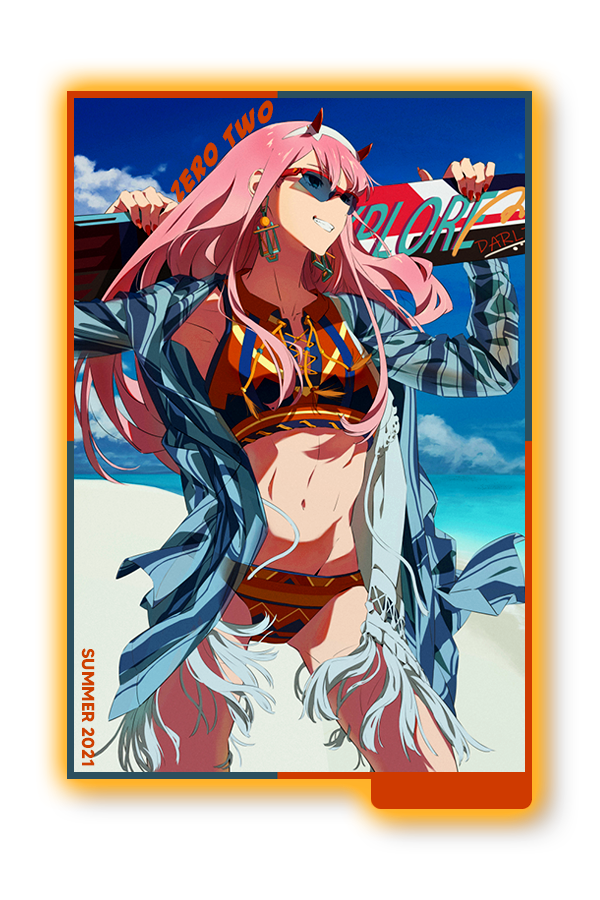
<style>
.page{position:relative;width:600px;height:900px;background:#ffffff}
.page>*{position:absolute;margin:0}
.t1{font:27.2px "#44FontItalic";color:#ce3f00}
.t2{font:17.4px "MADETOMMY-Bold";color:#ce3f00}
</style>
<div class="page">
<p class="t1" style="left:170px;top:100px;width:103px;height:103px;text-align:center">Zero Two</p>
<p class="t2" style="left:81px;top:648px;width:14px;height:118px;rotate:90deg">SUMMER 2021</p>
</div>
